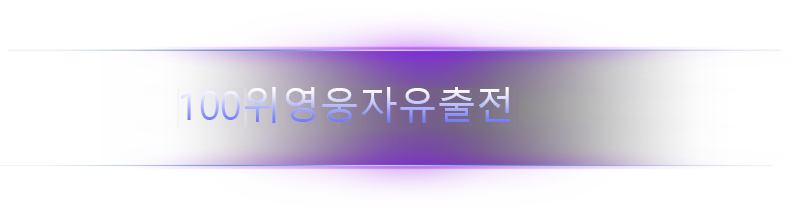
<style>
.page{position:relative;width:793px;height:215px;background:#ffffff}
.page>*{position:absolute;margin:0}
.t1{font:39px "MalgunGothicRegular"}
</style>
<div class="page">
<p class="t1" style="left:181px;top:87px;width:329px;height:36px">100위영웅자유출전</p>
</div>
